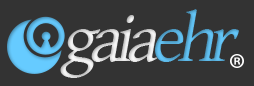
<style>
.page{position:relative;width:254px;height:86px;background:#333333}
.page>*{position:absolute;margin:0}
.t1{font:69.2px "GentiumBasic";letter-spacing:-0.1em;color:#e0e0e0;font-style:italic}
.t2{font:69.2px "GentiumBasic";letter-spacing:-0.1em;color:#5ab4e2;font-style:italic}
.t3{font:69.2px "GentiumBasic";letter-spacing:-0.1em;color:#dfdfdf;font-style:italic}
</style>
<div class="page">
<p class="t1" style="left:91px;top:15px;width:67px;height:47px">aia</p>
<p class="t2" style="left:155px;top:9px;width:84px;height:53px">ehr</p>
<p class="t3" style="left:60px;top:29px;width:41px;height:49px">g</p>
</div>
